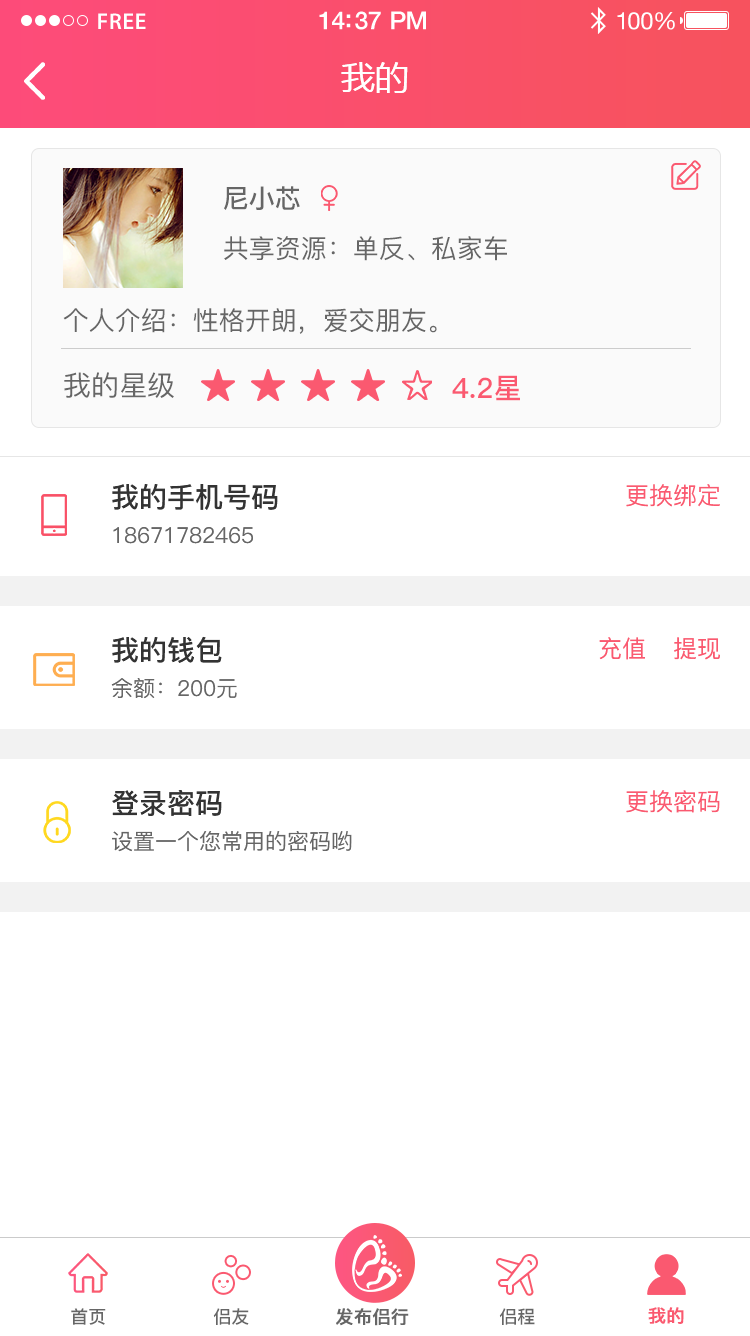
<style>
.page{position:relative;width:750px;height:1336px;background:#ffffff}
.page>*{position:absolute;margin:0}
.t1{font:23px "MyriadPro-Semibold";letter-spacing:0.02em;color:#ffffff}
.t2{font:25px "HelveticaNeue-Medium";letter-spacing:-0.02em;color:#ffffff}
.t3{font:24px "HelveticaNeue";letter-spacing:-0.02em;color:#ffffff}
.t4{font:34px "MicrosoftYaHei";color:#ffffff;text-transform:uppercase}
.t5{font:26px "PingFang-SC-Bold";color:#666666;text-transform:uppercase}
.t6{font:26px "PingFang-SC-Medium";color:#666666;text-transform:uppercase}
.t7{font:28px "PingFang-SC-Medium";color:#666666;text-transform:uppercase}
.t8{font:28px "PingFang-SC-Bold";color:#fa5970;text-transform:uppercase}
.t9{font:28px "PingFang-SC-Bold";color:#333333;text-transform:uppercase}
.t10{font:24px "PingFang-SC-Medium";color:#fa5970;text-transform:uppercase}
.t11{font:22px "PingFang-SC-Medium";color:#666666;text-transform:uppercase}
.t12{font:18px "PingFang-SC-Bold";color:#666666}
.t13{font:18px "PingFang-SC-Bold";color:#666666;font-weight:bold}
.t14{font:18px "PingFang-SC-Bold";color:#fa5970;font-weight:bold}
</style>
<div class="page">
<p class="t1" style="left:98px;top:13px;width:48px;height:16px">FREE</p>
<p class="t2" style="left:319px;top:11px;width:107px;height:19px">14:37 PM</p>
<p class="t3" style="left:617px;top:12px;width:58px;height:18px">100%</p>
<p class="t4" style="left:341px;top:62px;width:67px;height:31px">我的</p>
<p class="t5" style="left:224px;top:186px;width:76px;height:24px">尼小芯</p>
<p class="t6" style="left:224px;top:236px;width:283px;height:25px">共享资源：单反、私家车</p>
<p class="t6" style="left:63px;top:308px;width:374px;height:26px">个人介绍：性格开朗，爱交朋友。</p>
<p class="t7" style="left:64px;top:372px;width:110px;height:26px">我的星级</p>
<p class="t8" style="left:452px;top:375px;width:68px;height:26px">4.2星</p>
<p class="t9" style="left:112px;top:484px;width:166px;height:26px">我的手机号码</p>
<p class="t10" style="left:626px;top:484px;width:94px;height:23px">更换绑定</p>
<p class="t11" style="left:113px;top:527px;width:140px;height:17px">18671782465</p>
<p class="t9" style="left:112px;top:636px;width:110px;height:27px">我的钱包</p>
<p class="t10" style="left:599px;top:637px;width:46px;height:23px">充值</p>
<p class="t10" style="left:674px;top:637px;width:46px;height:23px">提现</p>
<p class="t11" style="left:111px;top:678px;width:126px;height:21px">余额：200元</p>
<p class="t9" style="left:112px;top:790px;width:110px;height:26px">登录密码</p>
<p class="t10" style="left:626px;top:790px;width:94px;height:23px">更换密码</p>
<p class="t11" style="left:112px;top:831px;width:240px;height:21px">设置一个您常用的密码哟</p>
<p class="t12" style="left:71px;top:1308px;width:35px;height:17px">首页</p>
<p class="t12" style="left:213px;top:1308px;width:36px;height:17px">侣友</p>
<p class="t13" style="left:336px;top:1308px;width:73px;height:18px">发布侣行</p>
<p class="t12" style="left:499px;top:1308px;width:36px;height:17px">侣程</p>
<p class="t14" style="left:648px;top:1307px;width:36px;height:17px">我的</p>
</div>
